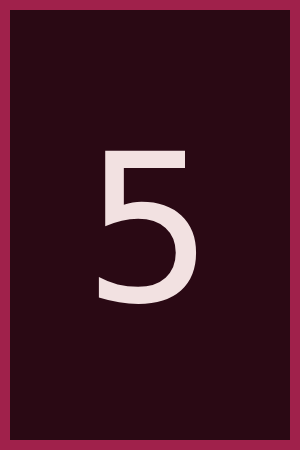
<style>
.page{position:relative;width:300px;height:450px;background:#2a0914}
.page>*{position:absolute;margin:0}
.t1{font:206px "DejaVuSans";color:#f2e1e1}
</style>
<div class="page">
<p class="t1" style="left:98px;top:150px;width:99px;height:154px">5</p>
</div>
